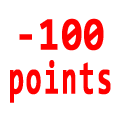
<style>
.page{position:relative;width:120px;height:120px;background:#ffffff}
.page>*{position:absolute;margin:0}
.t1{font:46.6px "Consolas-Bold";letter-spacing:0.05em;color:#ff0000;font-weight:bold;scale:0.8 1}
.t2{font:46.6px "Consolas-Bold";letter-spacing:0.05em;color:#ff0000;font-weight:bold;scale:0.6 1}
</style>
<div class="page">
<p class="t1" style="left:19px;top:18px;width:85px;height:33px">-100</p>
<p class="t2" style="left:10px;top:60px;width:101px;height:43px">points</p>
</div>
